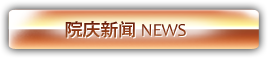
<style>
.page{position:relative;width:268px;height:58px}
.page>*{position:absolute;margin:0}
.t1{font:18.3px "FZYDZHJW--GB1-0";letter-spacing:-0.025em;text-transform:uppercase}
.t2{font:18.3px "Candara";letter-spacing:-0.025em;text-transform:uppercase}
</style>
<div class="page">
<p class="t1" style="left:65px;top:21px;width:121px;height:17px">院庆新闻 <span class="t2">News</span></p>
</div>
